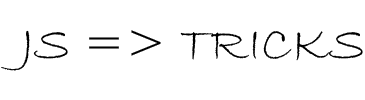
<style>
.page{position:relative;width:365px;height:100px;background:#ffffff}
.page>*{position:absolute;margin:0}
.t1{font:50.6px "BradleyHandITC";color:#000000}
</style>
<div class="page">
<p class="t1" style="left:1px;top:30px;width:362px;height:41px">JS =&gt; TRICKS</p>
</div>
